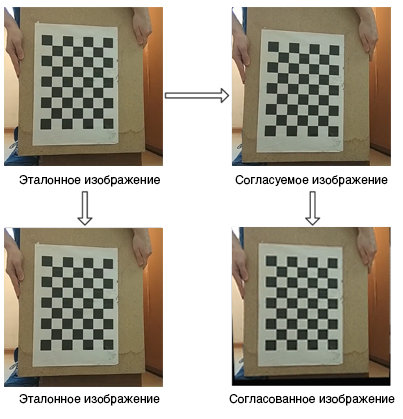
<style>
.page{position:relative;width:403px;height:419px;background:#ffffff}
.page>*{position:absolute;margin:0}
.t1{font:12px "Helvetica-Regular";color:#000000}
.t2{font:11.9px "Helvetica-Regular";color:#000000}
</style>
<div class="page">
<p class="t1" style="left:19px;top:175px;width:141px;height:12px">Эталонное изображение</p>
<p class="t2" style="left:235px;top:175px;width:153px;height:12px">Согласуемое изображение</p>
<p class="t2" style="left:19px;top:394px;width:141px;height:12px">Эталонное изображение</p>
<p class="t2" style="left:229px;top:394px;width:166px;height:12px">Согласованное изображение</p>
</div>
